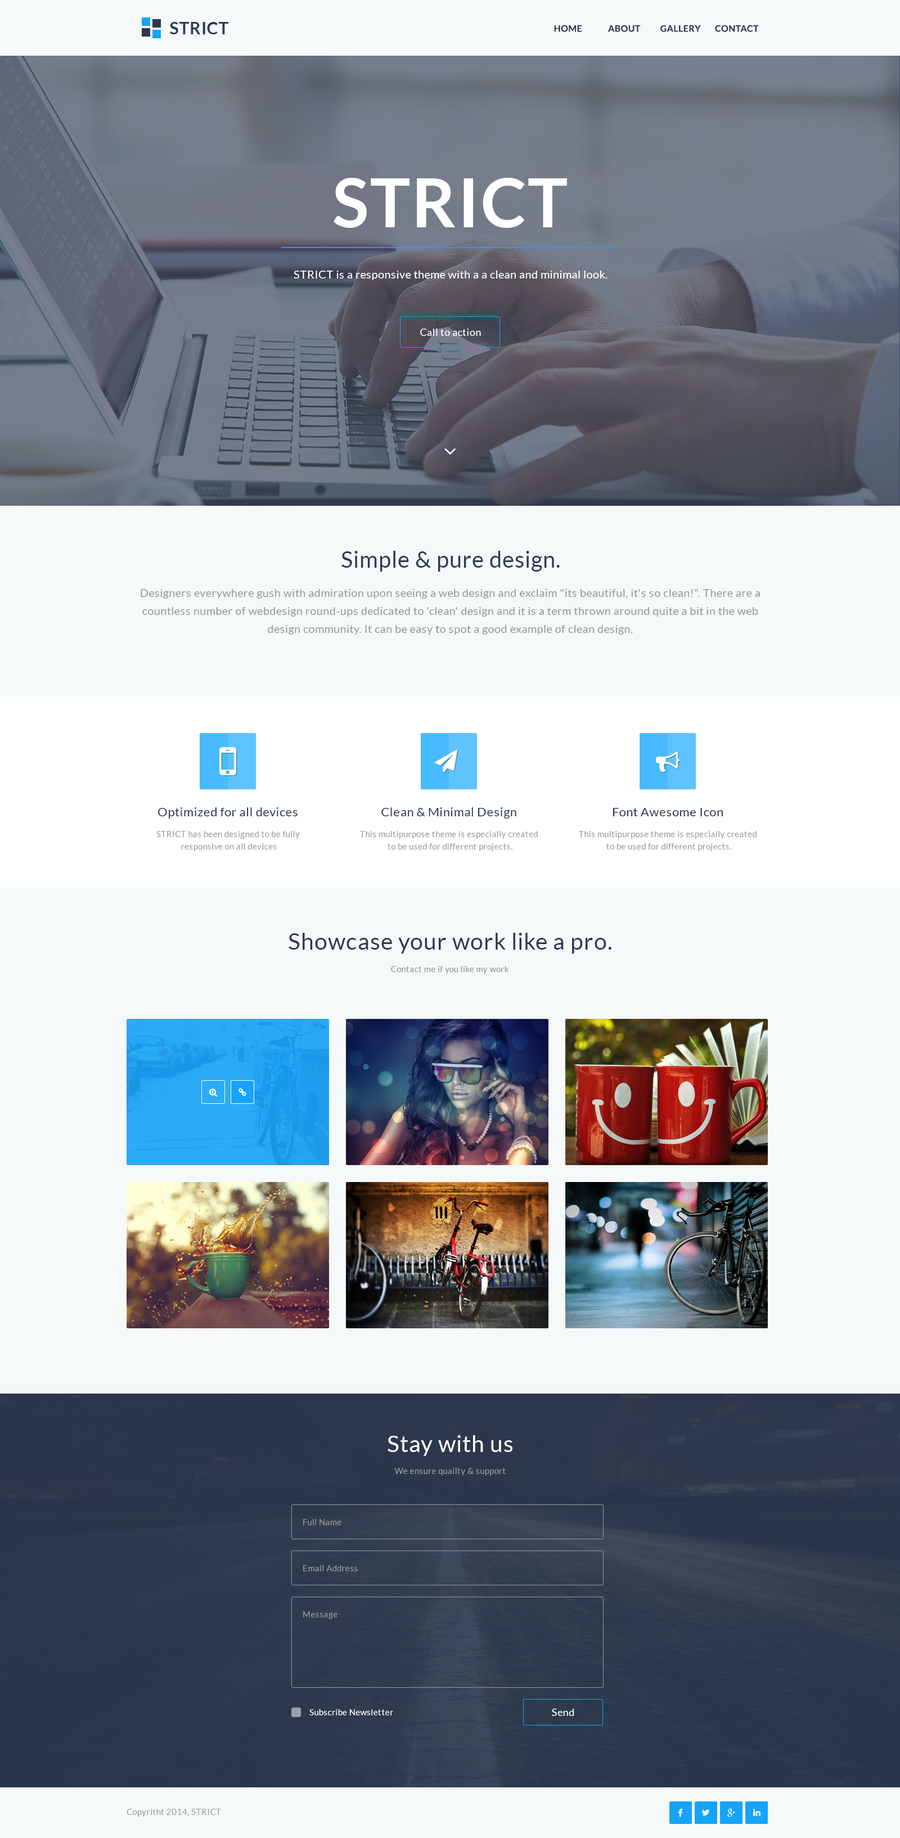
<style>
.page{position:relative;width:900px;height:1838px;background:#f6f9f9}
.page>*{position:absolute;margin:0}
.t1{font:16.9px "Lato-Bold";letter-spacing:0.025em;color:#2d3950}
.t2{font:9px "Lato-Bold";letter-spacing:0.025em;color:#2d3950}
.t3{font:67.5px "Lato-Bold";letter-spacing:0.025em;color:#ffffff}
.t4{font:11.2px "Lato-Regular";letter-spacing:0.025em;color:#ffffff}
.t5{font:10.1px "Lato-Regular";letter-spacing:0.025em;color:#ffffff}
.t6{font:22.5px "Lato-Regular";letter-spacing:0.025em;color:#2d3950}
.t7{font:11.2px/18px "Lato-Regular";letter-spacing:0.025em;color:#999999}
.t8{font:12.4px "Lato-Regular";letter-spacing:0.025em;color:#2d3950}
.t9{font:8.4px/12.4px "Lato-Regular";letter-spacing:0.025em;color:#999999}
.t10{font:23.1px "Lato-Regular";letter-spacing:0.025em;color:#2d3950}
.t11{font:8.4px "Lato-Regular";letter-spacing:0.025em;color:#909090}
.t12{font:23.1px "Lato-Regular";letter-spacing:0.025em;color:#ffffff}
.t13{font:8.4px "Lato-Regular";letter-spacing:0.025em;color:#999999}
.t14{font:8.4px "Lato-Regular";letter-spacing:0.025em;color:#ffffff}
</style>
<div class="page">
<p class="t1" style="left:170px;top:22px;width:58px;height:12px">STRICT</p>
<p class="t2" style="left:554px;top:25px;width:28px;height:7px">HOME</p>
<p class="t2" style="left:608px;top:25px;width:33px;height:7px">ABOUT</p>
<p class="t2" style="left:660px;top:25px;width:41px;height:7px">GALLERY</p>
<p class="t2" style="left:715px;top:25px;width:44px;height:7px">CONTACT</p>
<p class="t3" style="left:334px;top:178px;width:233px;height:50px">STRICT</p>
<p class="t4" style="left:294px;top:271px;width:314px;height:9px">STRICT is a responsive theme with a a clean and minimal look.</p>
<p class="t5" style="left:420px;top:328px;width:61px;height:8px">Call to action</p>
<p class="t6" style="left:341px;top:551px;width:219px;height:21px">Simple &amp; pure design.</p>
<p class="t7" style="left:141px;top:589px;width:619px;height:45px;text-align:center">Designers everywhere gush with admiration upon seeing a web design and exclaim "its beautiful, it's so clean!". There are a countless number of webdesign round-ups dedicated to 'clean' design and it is a term thrown around quite a bit in the web design community. It can be easy to spot a good example of clean design.</p>
<p class="t8" style="left:158px;top:807px;width:140px;height:11px">Optimized for all devices</p>
<p class="t8" style="left:381px;top:807px;width:135px;height:11px">Clean &amp; Minimal Design</p>
<p class="t8" style="left:613px;top:808px;width:110px;height:8px">Font Awesome Icon</p>
<p class="t9" style="left:156px;top:831px;width:144px;height:20px;text-align:center">STRICT has been designed to be fully <br>responsive on all devices</p>
<p class="t9" style="left:360px;top:831px;width:178px;height:20px;text-align:center">This multipurpose theme is especially created <br>to be used for different projects.</p>
<p class="t9" style="left:579px;top:831px;width:178px;height:20px;text-align:center">This multipurpose theme is especially created <br>to be used for different projects.</p>
<p class="t10" style="left:289px;top:933px;width:322px;height:20px">Showcase your work like a pro.</p>
<p class="t11" style="left:391px;top:966px;width:118px;height:8px">Contact me if you like my work</p>
<p class="t12" style="left:388px;top:1435px;width:124px;height:21px">Stay with us</p>
<p class="t13" style="left:394px;top:1468px;width:112px;height:7px">We ensure quailty &amp; support</p>
<p class="t13" style="left:303px;top:1519px;width:38px;height:6px">Full Name</p>
<p class="t13" style="left:303px;top:1565px;width:55px;height:6px">Email Address</p>
<p class="t13" style="left:303px;top:1611px;width:35px;height:8px">Message</p>
<p class="t14" style="left:309px;top:1709px;width:84px;height:6px">Subscribe Newsletter</p>
<p class="t5" style="left:552px;top:1708px;width:22px;height:8px">Send</p>
<p class="t13" style="left:127px;top:1808px;width:94px;height:8px">Copyritht 2014, STRICT</p>
</div>
